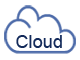
<style>
.page{position:relative;width:80px;height:60px;background:#ffffff}
.page>*{position:absolute;margin:0}
.t1{font:18px "ArialMT";letter-spacing:0.025em;color:#132a5a}
</style>
<div class="page">
<p class="t1" style="left:16px;top:35px;width:46px;height:13px">Cloud</p>
</div>
